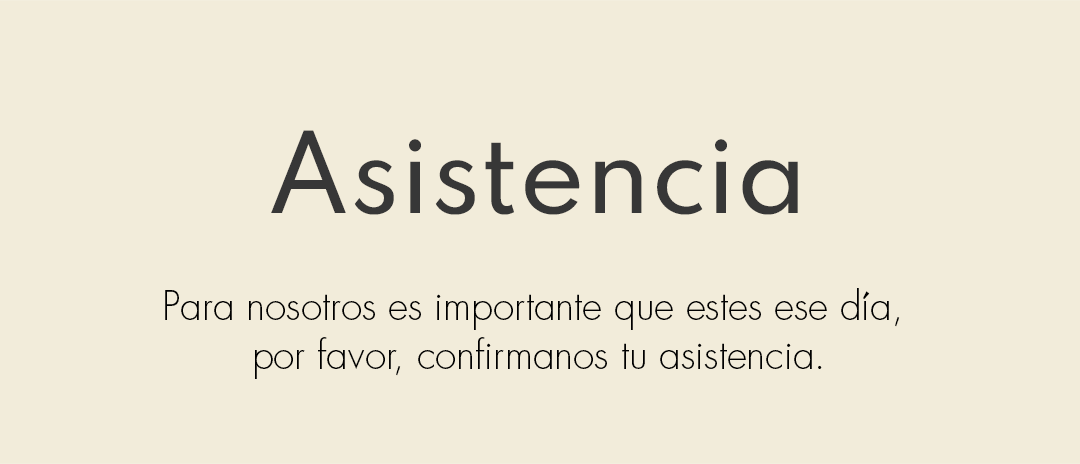
<style>
.page{position:relative;width:1080px;height:464px;background:#f2ecda}
.page>*{position:absolute;margin:0}
.t1{font:38.6px/49.4px "Futura-Light";color:#000000}
</style>
<div class="page">
<p class="t1" style="left:165px;top:288px;width:735px;height:91px;text-align:center">Para nosotros es importante que estes ese día, <br>por favor, confirmanos tu asistencia.</p>
</div>
